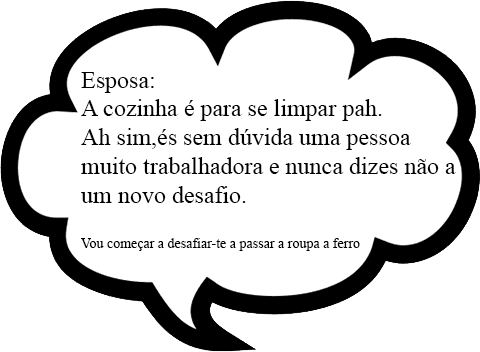
<style>
.page{position:relative;width:480px;height:352px;background:#ffffff}
.page>*{position:absolute;margin:0}
.t1{font:24px "TimesNewRomanPSMT";color:#000000}
.t2{font:14px "TimesNewRomanPSMT";color:#000000}
</style>
<div class="page">
<p class="t1" style="left:81px;top:72px;width:375px;height:179px">Esposa:<br>A cozinha é para se limpar pah.<br>Ah sim,és sem dúvida uma pessoa <br>muito trabalhadora e nunca dizes não a<br>um novo desafio.<br><br><span class="t2">Vou começar a desafiar-te a passar a roupa a ferro</span></p>
</div>
